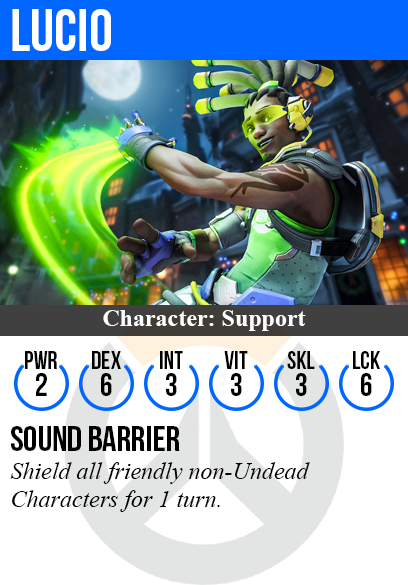
<style>
.page{position:relative;width:408px;height:585px;background:#ffffff}
.page>*{position:absolute;margin:0}
.t1{font:60px "BebasNeue";color:#ffffff}
.t2{font:24px "TimesNewRomanPS-BoldMT";color:#ffffff}
.t3{font:25px "BebasNeue";color:#000000}
.t4{font:32px "BebasNeue";color:#000000}
.t5{font:36px "BebasNeue";color:#000000}
.t6{font:24px "TimesNewRomanPS-ItalicMT";color:#000000}
</style>
<div class="page">
<p class="t1" style="left:12px;top:9px;width:99px;height:42px">lucio</p>
<p class="t2" style="left:103px;top:310px;width:203px;height:21px">Character: Support</p>
<p class="t3" style="left:25px;top:351px;width:32px;height:18px">PWR</p>
<p class="t3" style="left:92px;top:351px;width:29px;height:18px">dex</p>
<p class="t3" style="left:160px;top:351px;width:23px;height:18px">int</p>
<p class="t3" style="left:224px;top:351px;width:24px;height:18px">vit</p>
<p class="t3" style="left:287px;top:351px;width:28px;height:18px">skl</p>
<p class="t3" style="left:353px;top:351px;width:27px;height:18px">lck</p>
<p class="t4" style="left:36px;top:373px;width:11px;height:23px">2</p>
<p class="t4" style="left:101px;top:373px;width:11px;height:23px">6</p>
<p class="t4" style="left:166px;top:373px;width:11px;height:23px">3</p>
<p class="t4" style="left:231px;top:373px;width:11px;height:23px">3</p>
<p class="t4" style="left:296px;top:373px;width:11px;height:23px">3</p>
<p class="t4" style="left:361px;top:373px;width:11px;height:23px">6</p>
<p class="t5" style="left:11px;top:426px;width:169px;height:25px">sound barrier</p>
<p class="t6" style="left:10px;top:462px;width:300px;height:50px">Shield all friendly non-Undead<br>Characters for 1 turn.</p>
</div>
